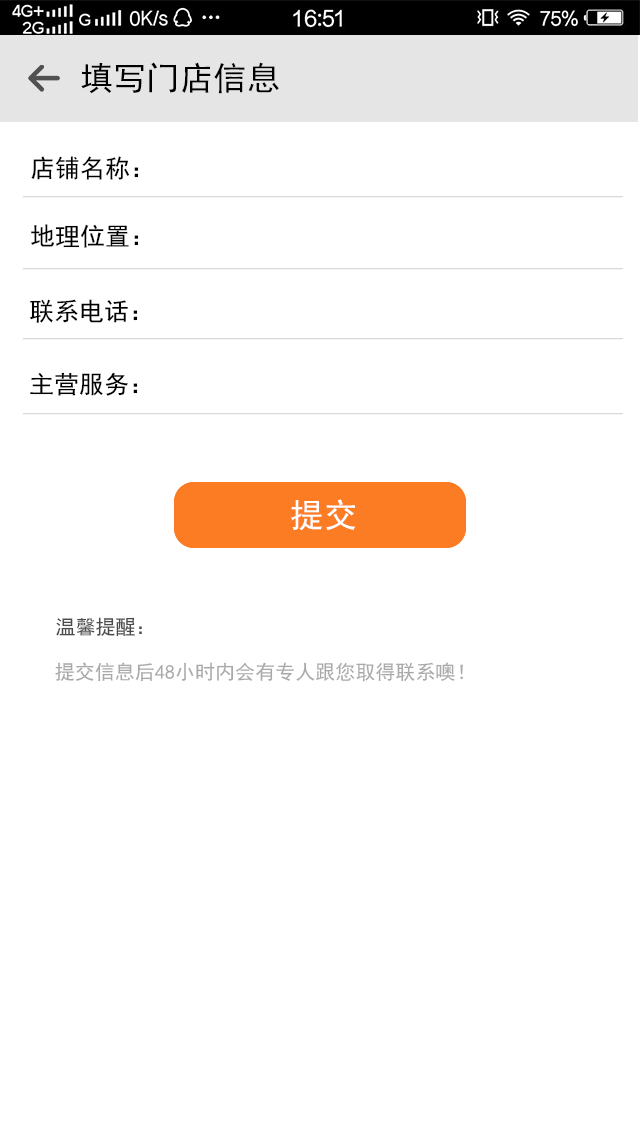
<style>
.page{position:relative;width:640px;height:1136px;background:#ffffff}
.page>*{position:absolute;margin:0}
.t1{font:33.3px "SimHei";letter-spacing:0.002em;color:#000000}
.t2{font:25px "SimHei";letter-spacing:0.002em;color:#000000}
.t3{font:33.3px "SimHei";letter-spacing:0.002em;color:#ffffff}
.t4{font:20px "SimHei";letter-spacing:0.002em;color:#4b4b4b}
.t5{font:12px "SimHei";letter-spacing:0.002em;color:#a9a9a9}
</style>
<div class="page">
<p class="t1" style="left:81px;top:62px;width:198px;height:32px">填写门店信息</p>
<p class="t2" style="left:31px;top:156px;width:108px;height:24px">店铺名称：</p>
<p class="t2" style="left:31px;top:224px;width:108px;height:24px">地理位置：</p>
<p class="t2" style="left:30px;top:299px;width:108px;height:24px">联系电话：</p>
<p class="t2" style="left:30px;top:372px;width:108px;height:24px">主营服务：</p>
<p class="t3" style="left:291px;top:499px;width:65px;height:32px">提交</p>
<p class="t4" style="left:56px;top:617px;width:86px;height:20px">温馨提醒：</p>
<p class="t5" style="left:55px;top:662px;width:408px;height:20px">提交信息后48小时内会有专人跟您取得联系噢！</p>
</div>
